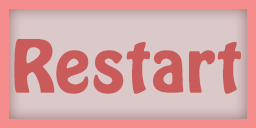
<style>
.page{position:relative;width:256px;height:128px;background:#dbc8c8}
.page>*{position:absolute;margin:0}
.t1{font:63.8px "HoboStd";color:#c95b5b;font-weight:bold}
</style>
<div class="page">
<p class="t1" style="left:14px;top:39px;width:227px;height:55px">Restart</p>
</div>
